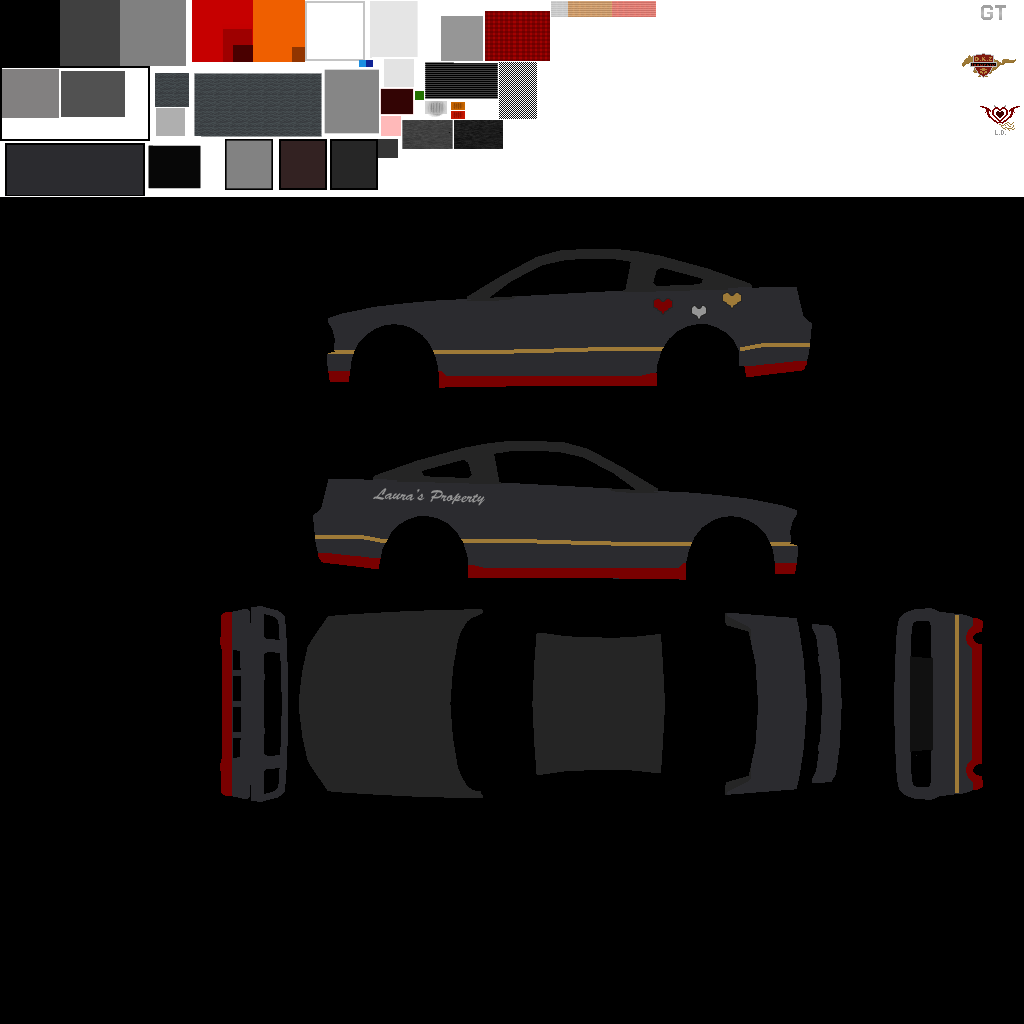
<style>
.page{position:relative;width:1024px;height:1024px;background:#000000}
.page>*{position:absolute;margin:0}
.t1{font:16px "BrushScriptStd";color:#959595}
</style>
<div class="page">
<p class="t1" style="left:373px;top:488px;width:112px;height:18px;rotate:2deg">Laura’s Property</p>
</div>
